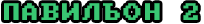
<style>
.page{position:relative;width:204px;height:24px;background:#000000}
.page>*{position:absolute;margin:0}
.t1{font:19px "PxPlus_IBM_BIOS";letter-spacing:0.075em;color:#39c773}
</style>
<div class="page">
<p class="t1" style="left:4px;top:3px;width:194px;height:17px">ПАВИЛЬОН 2</p>
</div>
